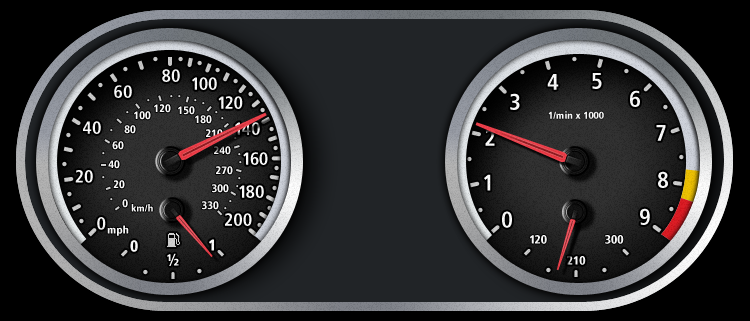
<style>
.page{position:relative;width:750px;height:321px}
.page>*{position:absolute;margin:0}
.t1{font:17.6px "FrutigerLTStd-BoldCn";color:#ffffff}
.t2{font:22.5px "FrutigerLTStd-BoldCn";color:#ffffff}
.t3{font:10.8px "FrutigerLTStd-BlackCn";color:#ffffff}
.t4{font:9.8px "FrutigerLTStd-BlackCn";color:#ffffff}
.t5{font:17.6px "FrutigerLTStd-BoldCn"}
.t6{font:22.5px "FrutigerLTStd-BoldCn"}
.t7{font:17.6px "FrutigerLTStd-BoldCn";letter-spacing:-0.04em;color:#ffffff}
.t8{font:15.7px "FrutigerLTStd-BlackCn";color:#ffffff}
.t9{font:11.8px "FrutigerLTStd-BlackCn";color:#ffffff}
</style>
<div class="page">
<p class="t1" style="left:162px;top:69px;width:18px;height:13px">80</p>
<p class="t1" style="left:192px;top:77px;width:25px;height:13px">100</p>
<p class="t2" style="left:547px;top:74px;width:12px;height:16px">4</p>
<p class="t2" style="left:592px;top:73px;width:10px;height:16px">5</p>
<p class="t1" style="left:114px;top:85px;width:18px;height:13px">60</p>
<p class="t1" style="left:218px;top:96px;width:25px;height:13px">120</p>
<p class="t2" style="left:510px;top:93px;width:10px;height:17px">3</p>
<p class="t2" style="left:630px;top:90px;width:10px;height:17px">6</p>
<p class="t3" style="left:134px;top:111px;width:17px;height:9px">100</p>
<p class="t3" style="left:154px;top:104px;width:17px;height:9px">120</p>
<p class="t3" style="left:178px;top:106px;width:17px;height:9px">150</p>
<p class="t4" style="left:548px;top:111px;width:56px;height:8px">1/min x 1000</p>
<p class="t1" style="left:83px;top:121px;width:18px;height:13px">40</p>
<p class="t3" style="left:124px;top:125px;width:12px;height:9px">80</p>
<p class="t3" style="left:195px;top:115px;width:17px;height:9px">180</p>
<p class="t5" style="left:235px;top:122px;width:25px;height:13px">140</p>
<p class="t2" style="left:656px;top:125px;width:10px;height:16px">7</p>
<p class="t3" style="left:206px;top:129px;width:17px;height:9px">210</p>
<p class="t6" style="left:485px;top:129px;width:10px;height:17px">2</p>
<p class="t3" style="left:112px;top:141px;width:12px;height:9px">60</p>
<p class="t3" style="left:214px;top:146px;width:17px;height:9px">240</p>
<p class="t3" style="left:108px;top:160px;width:12px;height:9px">40</p>
<p class="t7" style="left:243px;top:152px;width:25px;height:13px">160</p>
<p class="t1" style="left:75px;top:170px;width:18px;height:13px">20</p>
<p class="t3" style="left:216px;top:166px;width:17px;height:9px">270</p>
<p class="t2" style="left:484px;top:174px;width:7px;height:17px">1</p>
<p class="t2" style="left:658px;top:171px;width:10px;height:17px">8</p>
<p class="t3" style="left:113px;top:180px;width:12px;height:9px">20</p>
<p class="t3" style="left:212px;top:184px;width:17px;height:9px">300</p>
<p class="t1" style="left:239px;top:185px;width:25px;height:13px">180</p>
<p class="t3" style="left:122px;top:199px;width:6px;height:9px">0</p>
<p class="t4" style="left:131px;top:204px;width:22px;height:8px">km/h</p>
<p class="t3" style="left:202px;top:201px;width:17px;height:9px">330</p>
<p class="t2" style="left:640px;top:208px;width:10px;height:17px">9</p>
<p class="t1" style="left:97px;top:217px;width:9px;height:13px">0</p>
<p class="t1" style="left:225px;top:213px;width:27px;height:13px">200</p>
<p class="t2" style="left:502px;top:211px;width:10px;height:17px">0</p>
<p class="t3" style="left:107px;top:225px;width:22px;height:11px">mph</p>
<p class="t8" style="left:130px;top:240px;width:8px;height:12px">0</p>
<p class="t8" style="left:209px;top:239px;width:5px;height:12px">1</p>
<p class="t9" style="left:529px;top:235px;width:18px;height:9px">120</p>
<p class="t9" style="left:605px;top:235px;width:19px;height:9px">300</p>
<p class="t8" style="left:167px;top:253px;width:12px;height:13px">½</p>
<p class="t9" style="left:567px;top:256px;width:19px;height:9px">210</p>
</div>
